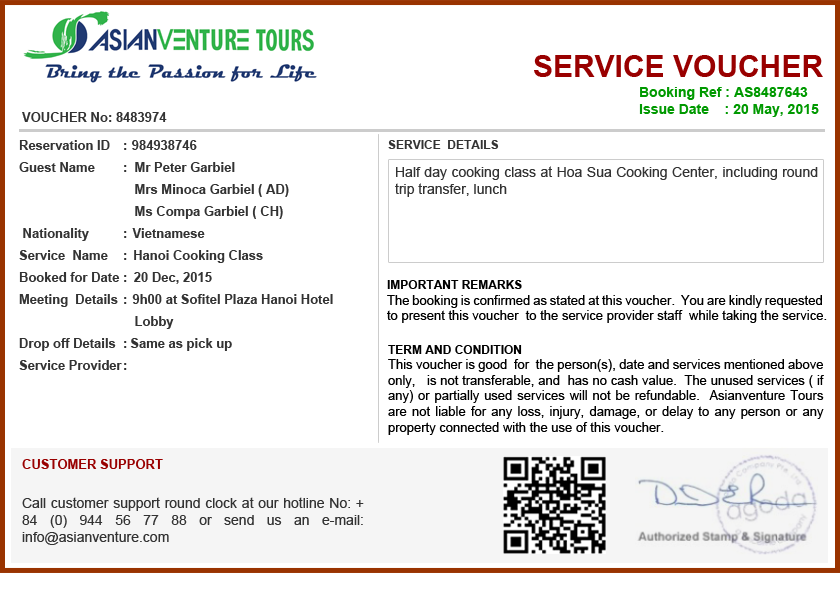
<style>
.page{position:relative;width:840px;height:600px;background:#ffffff}
.page>*{position:absolute;margin:0}
.t1{font:30px "Arial-BoldMT";color:#990000}
.t2{font:14px "Arial-BoldMT";color:#009900}
.t3{font:13px "Arial-BoldMT";color:#333333}
.t4{font:13px/22px "Arial-BoldMT";color:#333333}
.t5{font:12px "Arial-BoldMT";color:#333333}
.t6{font:14px "ArialMT";color:#333333}
.t7{font:13px "ArialMT";color:#000000}
.t8{font:12px "Arial-BoldMT";color:#000000}
.t9{font:13px/22px "Arial-BoldMT";color:#990000}
</style>
<div class="page">
<p class="t1" style="left:534px;top:55px;width:289px;height:22px">SERVICE VOUCHER</p>
<p class="t2" style="left:639px;top:87px;width:180px;height:30px;text-align:justify">Booking Ref : AS8487643<br>Issue Date    : 20 May, 2015</p>
<p class="t3" style="left:22px;top:112px;width:145px;height:10px">VOUCHER No: 8483974</p>
<p class="t4" style="left:19px;top:140px;width:314px;height:230px;text-align:justify">Reservation ID      984938746<br>Guest Name           Mr Peter Garbiel<br>                                Mrs Minoca Garbiel ( AD)<br>                                Ms Compa Garbiel ( CH) <br> Nationality            Vietnamese <br>Service  Name       Hanoi Cooking Class<br>Booked for Date    20 Dec, 2015<br>Meeting  Details    9h00 at Sofitel Plaza Hanoi Hotel <br>                                Lobby<br>Drop off Details    Same as pick up<br>Service Provider</p>
<p class="t4" style="left:124px;top:143px;width:3px;height:227px;text-align:justify">:<br>:<br><br><br>:<br>:<br>:<br>:<br><br>:<br>:</p>
<p class="t5" style="left:388px;top:140px;width:111px;height:9px">SERVICE  DETAILS</p>
<p class="t6" style="left:395px;top:166px;width:423px;height:31px;text-align:justify">Half day cooking class at Hoa Sua Cooking Center, including round trip transfer, lunch</p>
<p class="t7" style="left:387px;top:280px;width:440px;height:43px;text-align:justify"><span class="t8">IMPORTANT REMARKS <br></span>The booking is confirmed as stated at this voucher.  You are kindly requested to present this voucher  to the service provider staff  while taking the service.</p>
<p class="t7" style="left:388px;top:345px;width:436px;height:90px;text-align:justify"><span class="t8">TERM AND CONDITION <br></span>This voucher is good  for  the person(s), date and services mentioned above only,   is not transferable, and  has no cash value.  The unused services ( if any) or partially used services will not be refundable.  Asianventure Tours are not liable for any loss, injury, damage, or delay to any person or any property connected with the use of this voucher.</p>
<p class="t6" style="left:22px;top:459px;width:342px;height:86px"><span class="t9">CUSTOMER SUPPORT<br><br></span>Call customer support round clock at our hotline No: + 84 (0) 944 56 77 88 or send us an e-mail:  info@asianventure.com</p>
</div>
